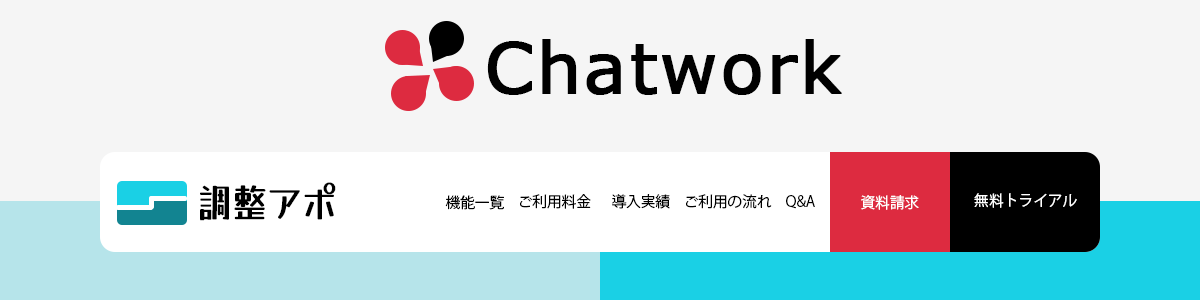
<style>
.page{position:relative;width:1200px;height:300px;background:#f5f5f5}
.page>*{position:absolute;margin:0}
.t1{font:70px "MSReferenceSansSerif";letter-spacing:0.02em;color:#000000;font-weight:bold}
.t2{font:40px "YuseiMagic-Regular";color:#000000;scale:0.88 1}
.t3{font:15px "KozGoPr6N-Regular";color:#000000}
.t4{font:15px "KozGoPr6N-Regular";color:#ffffff}
</style>
<div class="page">
<p class="t1" style="left:487px;top:39px;width:355px;height:56px">Chatwork</p>
<p class="t2" style="left:200px;top:182px;width:136px;height:39px">調整アポ</p>
<p class="t3" style="left:445px;top:195px;width:59px;height:15px">機能一覧</p>
<p class="t3" style="left:520px;top:194px;width:71px;height:15px">ご利用料金</p>
<p class="t3" style="left:612px;top:194px;width:58px;height:15px">導入実績</p>
<p class="t3" style="left:686px;top:194px;width:86px;height:15px">ご利用の流れ</p>
<p class="t3" style="left:786px;top:195px;width:29px;height:14px">Q&amp;A</p>
<p class="t4" style="left:861px;top:195px;width:58px;height:15px">資料請求</p>
<p class="t4" style="left:974px;top:193px;width:103px;height:15px">無料トライアル</p>
</div>
